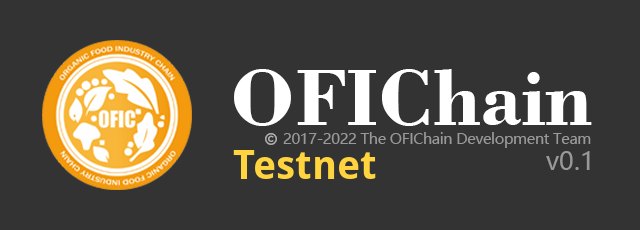
<style>
.page{position:relative;width:640px;height:230px;background:#333333}
.page>*{position:absolute;margin:0}
.t1{font:84.5px "BodoniBT-Bold";color:#ffffff}
.t2{font:15px "MicrosoftYaHei";letter-spacing:-0.025em;color:#999999}
.t3{font:25.4px "MicrosoftYaHei";color:#999999}
</style>
<div class="page">
<p class="t1" style="left:234px;top:69px;width:358px;height:57px">OFIChain</p>
<p class="t2" style="left:283px;top:132px;width:308px;height:16px">2017-2022 The OFIChain Development Team</p>
<p class="t3" style="left:546px;top:151px;width:44px;height:19px">v0.1</p>
</div>
